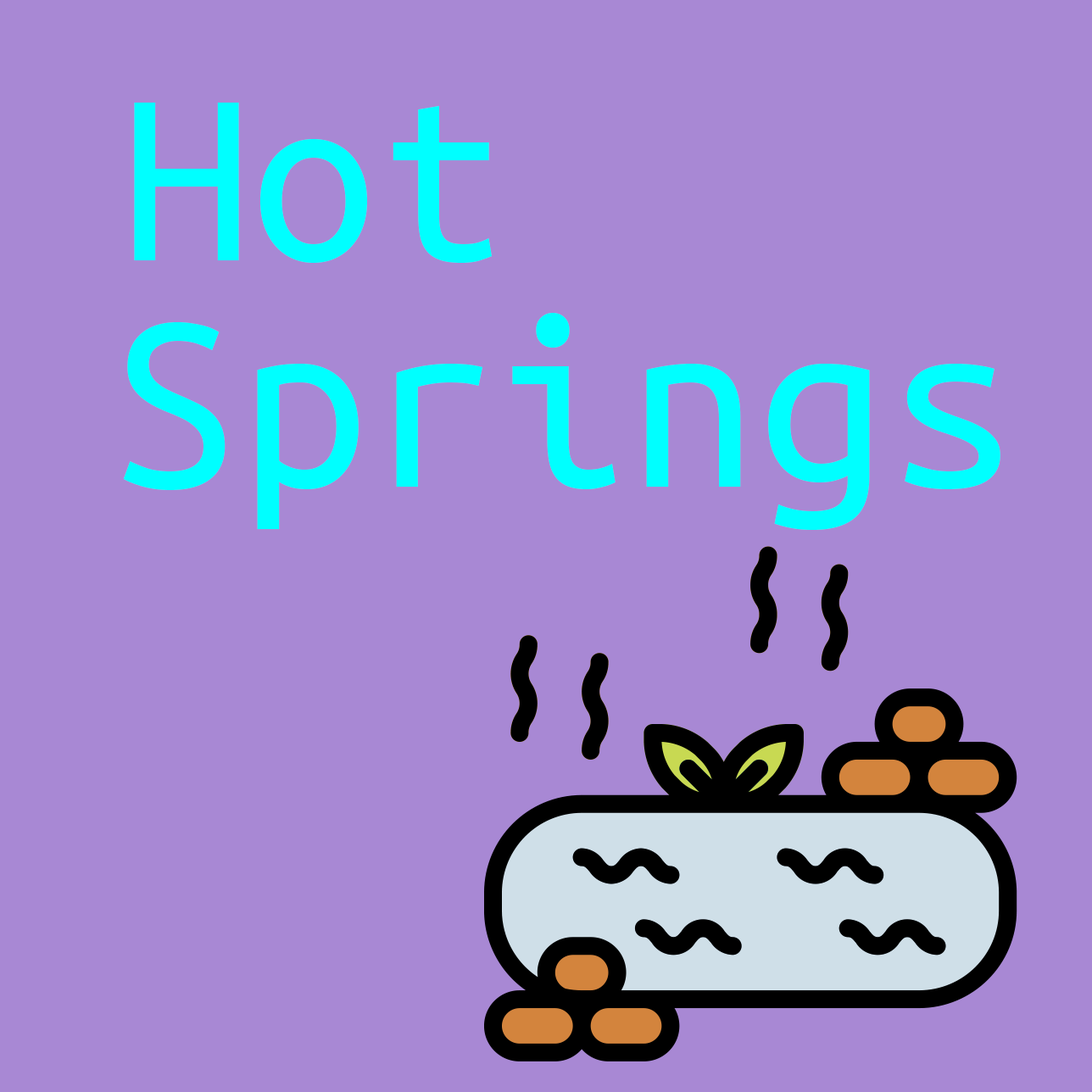
<style>
.page{position:relative;width:1092px;height:1092px;background:#a888d4}
.page>*{position:absolute;margin:0}
.t1{font:254.3px "UbuntuMono-Regular";color:#00ffff}
.t2{font:259.4px "UbuntuMono-Regular";color:#00ffff}
</style>
<div class="page">
<p class="t1" style="left:134px;top:103px;width:358px;height:160px">Hot</p>
<p class="t2" style="left:123px;top:313px;width:877px;height:217px">Springs</p>
</div>
